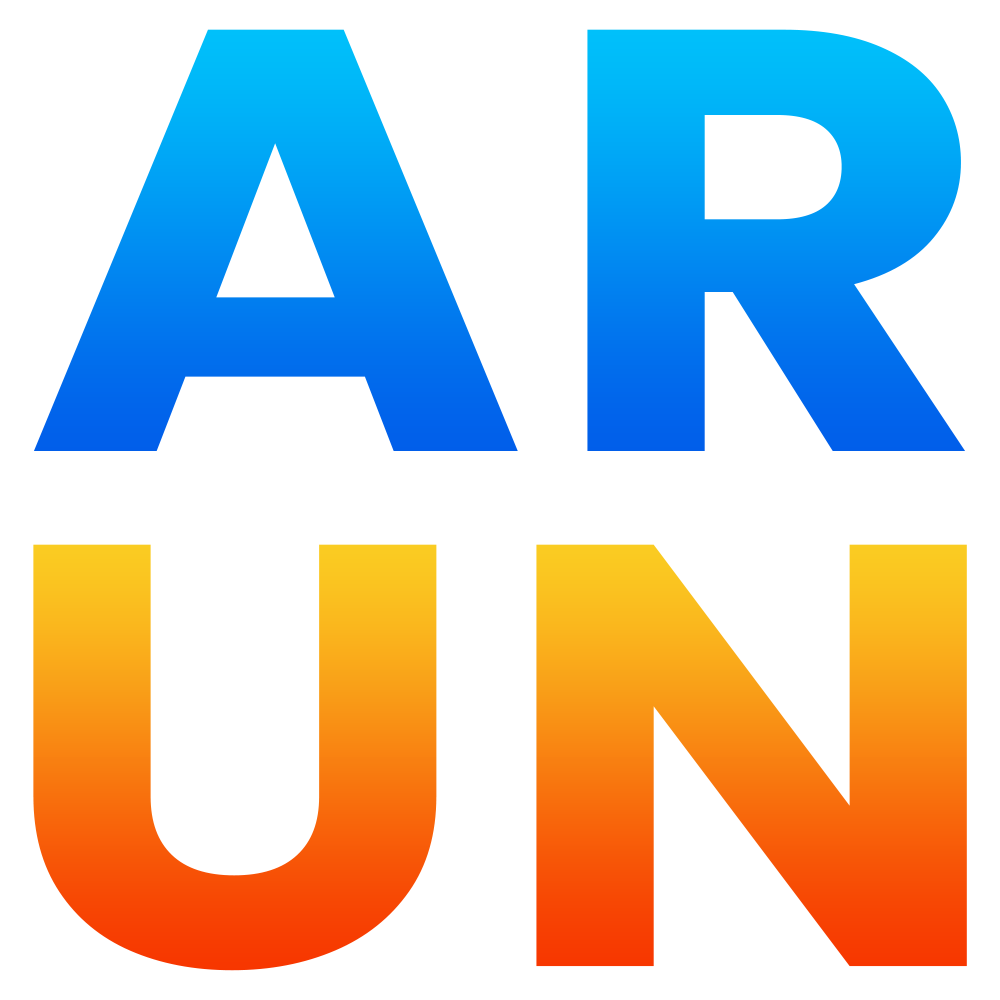
<style>
.page{position:relative;width:1000px;height:1000px;background:#ffffff}
.page>*{position:absolute;margin:0}
.t1{font:600.1px "Poppins-Bold";letter-spacing:0.025em;scale:1.14 1}
</style>
<div class="page">
<p class="t1" style="left:33px;top:29px;width:933px;height:422px">AR</p>
<p class="t1" style="left:33px;top:544px;width:934px;height:427px">UN</p>
</div>
